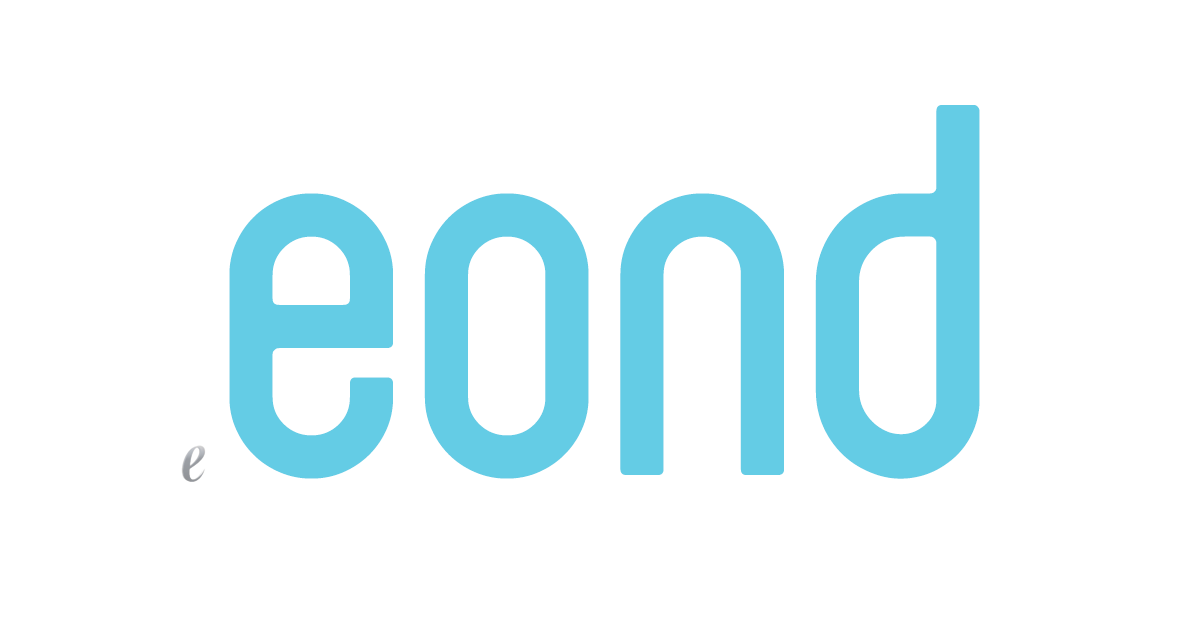
<style>
.page{position:relative;width:1200px;height:627px;background:#ffffff}
.page>*{position:absolute;margin:0}
.t1{font:500px "071MKSD-01Medium";letter-spacing:-0.01em;color:#64cce5}
</style>
<div class="page">
<p class="t1" style="left:229px;top:105px;width:751px;height:374px">eond</p>
</div>
